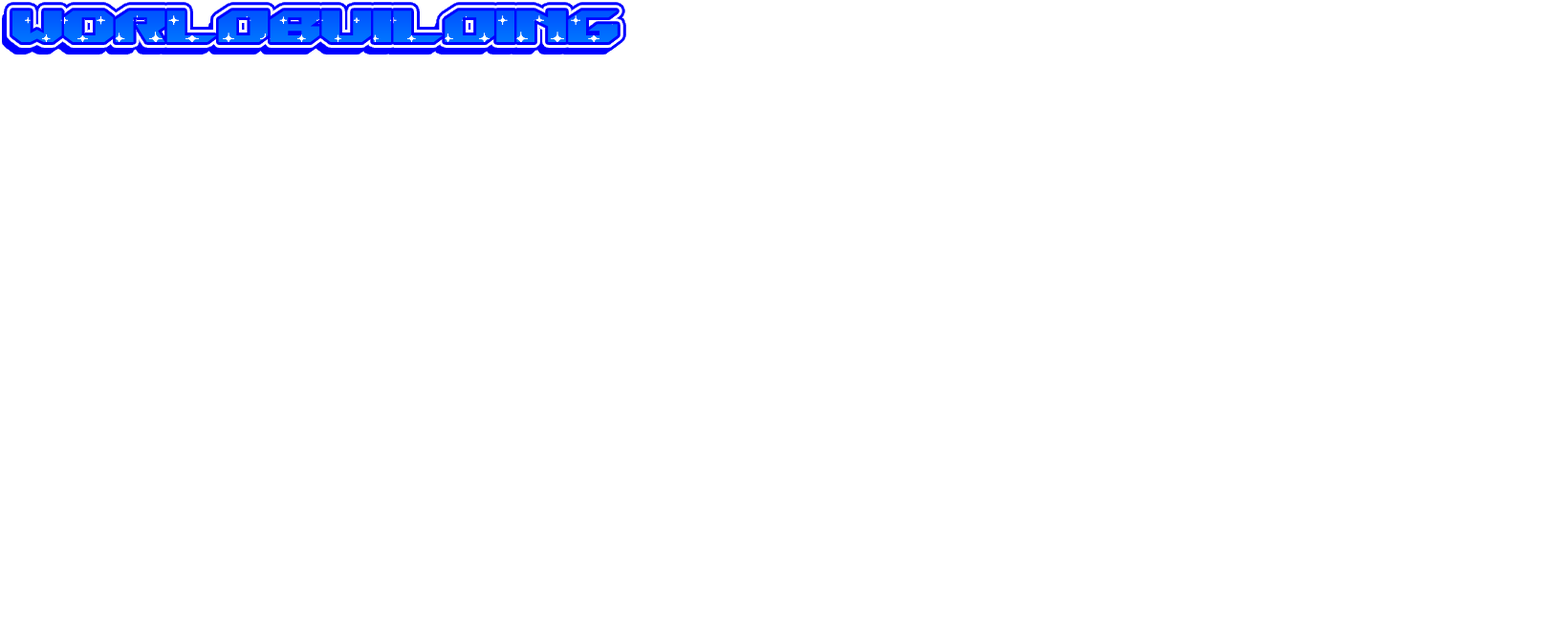
<style>
.page{position:relative;width:1568px;height:635px;background:#ffffff}
.page>*{position:absolute;margin:0}
.t1{font:38.2px "NiseGenesis";color:#0066ff}
</style>
<div class="page">
<p class="t1" style="left:12px;top:11px;width:606px;height:31px">WorldBuilding</p>
</div>
